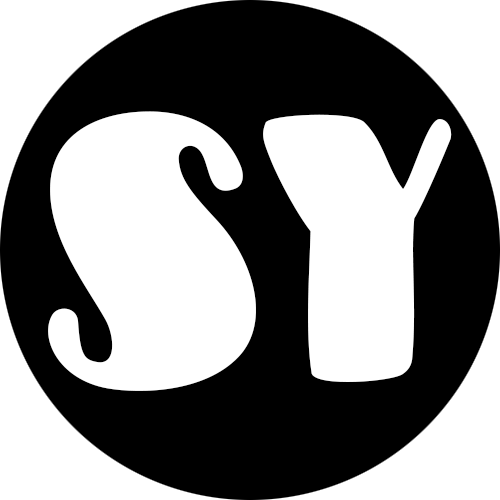
<style>
.page{position:relative;width:500px;height:500px;background:#ffffff}
.page>*{position:absolute;margin:0}
.t1{font:371.6px "SleepyFatCat";color:#ffffff}
</style>
<div class="page">
<p class="t1" style="left:48px;top:111px;width:404px;height:280px">SY</p>
</div>
